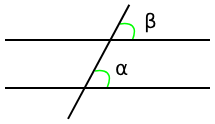
<style>
.page{position:relative;width:215px;height:124px;background:#ffffff}
.page>*{position:absolute;margin:0}
.t1{font:20px "DejaVuSans";color:#000000}
</style>
<div class="page">
<p class="t1" style="left:145px;top:12px;width:11px;height:21px">β</p>
<p class="t1" style="left:116px;top:63px;width:12px;height:13px">α</p>
</div>
